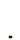
<style>
.page{position:relative;width:20px;height:40px;background:#ffffff}
.page>*{position:absolute;margin:0}
.t1{font:18px "Mohave-Bold";color:#2c1800;scale:1.39 1}
</style>
<div class="page">
<p class="t1" style="left:8px;top:35px;width:5px;height:4px">.</p>
</div>
